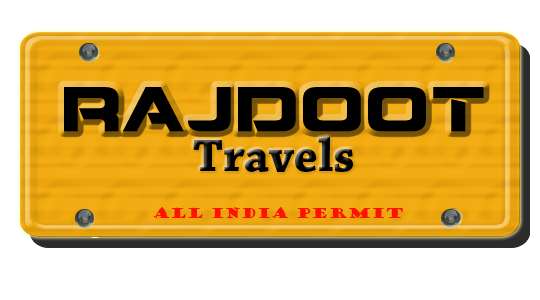
<style>
.page{position:relative;width:540px;height:300px;background:#ffffff}
.page>*{position:absolute;margin:0}
.t1{font:62px "Montalban";color:#000000}
.t2{font:48px "ChaparralPro-Bold";color:#000000}
.t3{font:14px "GoudyStout";color:#ff1200}
</style>
<div class="page">
<p class="t1" style="left:64px;top:87px;width:420px;height:45px">RAJDOOT</p>
<p class="t2" style="left:193px;top:137px;width:160px;height:35px">Travels</p>
<p class="t3" style="left:153px;top:207px;width:250px;height:11px">ALL INDIA PERMIT</p>
</div>
